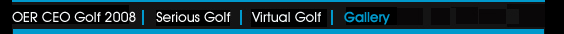
<style>
.page{position:relative;width:564px;height:34px;background:#000000}
.page>*{position:absolute;margin:0}
.t1{font:14px "AvantGardeITCbyBT-Medium";color:#f7f9fa}
.t2{font:14px "AvantGardeITCbyBT-Medium";color:#fafbfb}
.t3{font:14px "AvantGardeITCbyBT-Medium";color:#f5f9fa}
.t4{font:14px "AvantGardeITCbyBT-Medium";color:#0099cc}
</style>
<div class="page">
<p class="t1" style="left:12px;top:11px;width:124px;height:11px">OER CEO Golf 2008</p>
<p class="t2" style="left:156px;top:11px;width:75px;height:11px">Serious Golf</p>
<p class="t3" style="left:251px;top:11px;width:70px;height:11px">Virtual Golf</p>
<p class="t4" style="left:344px;top:11px;width:46px;height:14px">Gallery</p>
</div>
